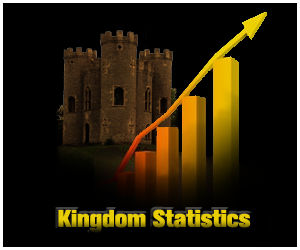
<style>
.page{position:relative;width:300px;height:250px;background:#000000}
.page>*{position:absolute;margin:0}
.t1{font:24px "AkzidenzGroteskBQ-XBold";color:#eace05}
</style>
<div class="page">
<p class="t1" style="left:58px;top:209px;width:193px;height:24px">Kingdom Statistics</p>
</div>
